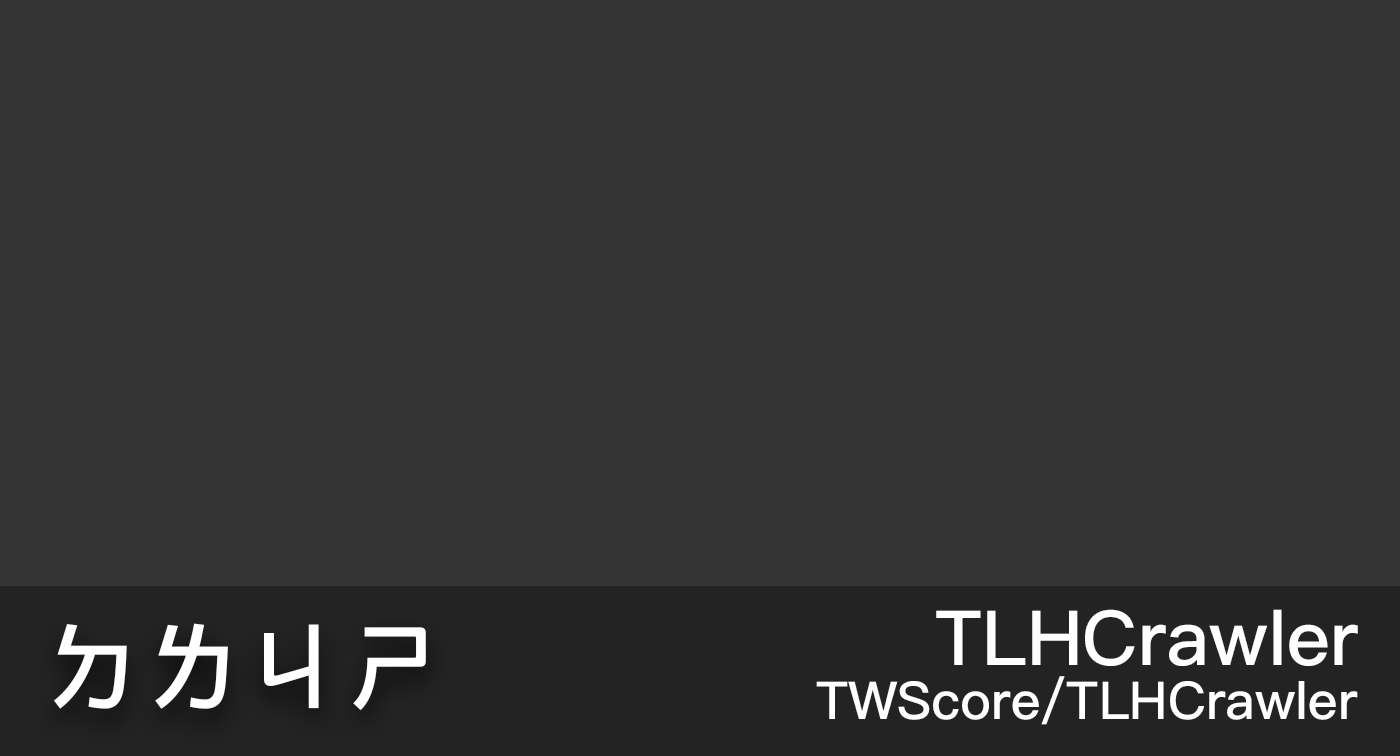
<style>
.page{position:relative;width:1400px;height:756px;background:#333333}
.page>*{position:absolute;margin:0}
.t1{font:75.9px "PingFangHK-Medium";color:#ffffff}
.t2{font:100.4px "PingFangHK-Medium";color:#ffffff}
.t3{font:52.2px "PingFangHK-Medium";color:#ffffff}
</style>
<div class="page">
<p class="t1" style="left:936px;top:609px;width:422px;height:57px">TLHCrawler</p>
<p class="t2" style="left:54px;top:623px;width:372px;height:88px">ㄉㄌㄐㄕ</p>
<p class="t3" style="left:816px;top:676px;width:542px;height:49px">TWScore/TLHCrawler</p>
</div>
